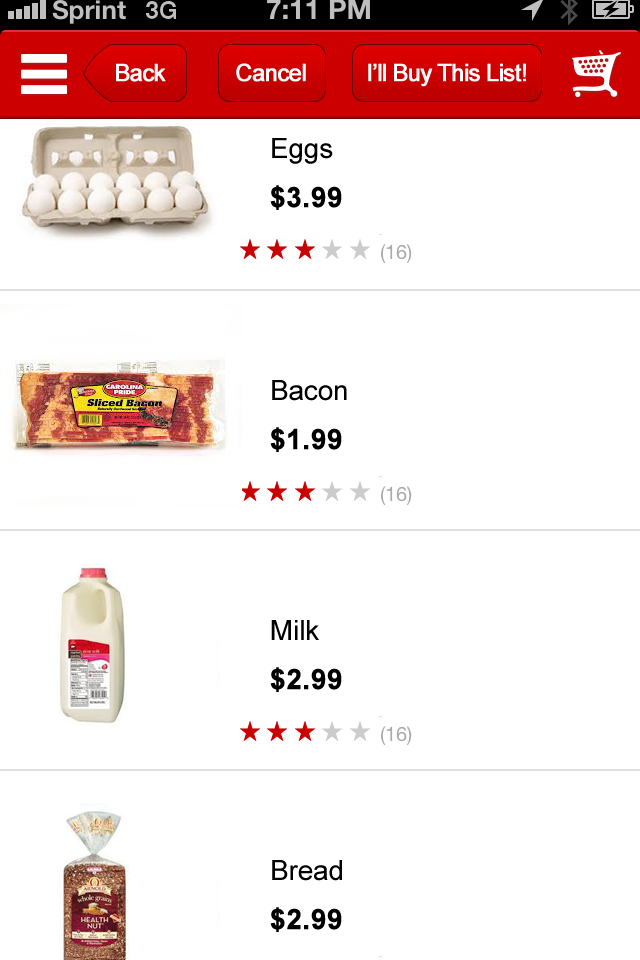
<style>
.page{position:relative;width:640px;height:960px;background:#ffffff}
.page>*{position:absolute;margin:0}
.t1{font:24px "ArialMT";letter-spacing:-0.055em;color:#fffefe;font-weight:bold}
.t2{font:27.7px "ArialMT";color:#000000}
.t3{font:25.7px "Arial-BoldMT";color:#cc0000}
.t4{font:27.7px "Arial-BoldMT";color:#010000;font-weight:bold}
</style>
<div class="page">
<p class="t1" style="left:116px;top:63px;width:50px;height:19px">Back</p>
<p class="t1" style="left:236px;top:63px;width:70px;height:19px">Cancel</p>
<p class="t1" style="left:368px;top:63px;width:158px;height:24px">I’ll Buy This List!</p>
<p class="t2" style="left:272px;top:138px;width:61px;height:26px"><span class="t3"><br><br></span>Eggs</p>
<p class="t4" style="left:270px;top:185px;width:72px;height:25px">$3.99</p>
<p class="t2" style="left:272px;top:380px;width:75px;height:21px"><span class="t3"><br><br></span>Bacon</p>
<p class="t4" style="left:270px;top:427px;width:72px;height:25px">$1.99</p>
<p class="t2" style="left:271px;top:620px;width:48px;height:20px"><span class="t3"><br><br></span>Milk</p>
<p class="t4" style="left:270px;top:667px;width:72px;height:25px">$2.99</p>
<p class="t2" style="left:272px;top:860px;width:70px;height:21px"><span class="t3"><br><br></span>Bread</p>
<p class="t4" style="left:270px;top:907px;width:72px;height:25px">$2.99</p>
</div>
